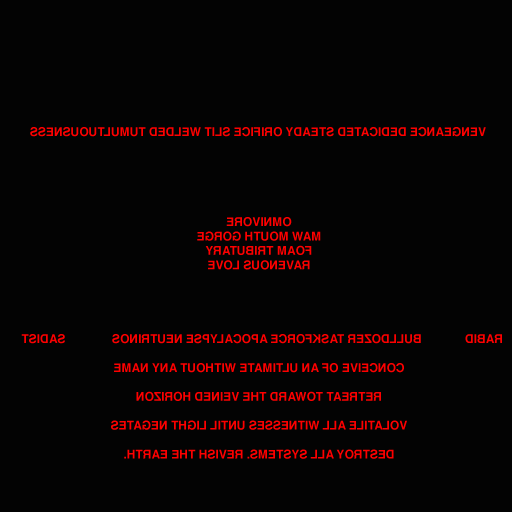
<style>
.page{position:relative;width:512px;height:512px;background:#030303}
.page>*{position:absolute;margin:0}
.t1{font:12px "Helvetica-Bold";color:#fd0000}
</style>
<div class="page">
<p class="t1" style="left:30px;top:127px;width:456px;height:10px;rotate:180deg">VENGEANCE DEDICATED STEADY ORIFICE SLIT WELDED TUMULTUOUSNESS</p>
<p class="t1" style="left:197px;top:217px;width:124px;height:53px;text-align:center;rotate:180deg">OMNIVORE<br>MAW MOUTH GORGE<br>FOAM TRIBUTARY<br>RAVENOUS LOVE</p>
<p class="t1" style="left:21px;top:334px;width:481px;height:10px;rotate:180deg">RABID             BULLDOZER TASKFORCE APOCALYPSE NEUTRINOS              SADIST</p>
<p class="t1" style="left:111px;top:363px;width:296px;height:96px;text-align:center;rotate:180deg">CONCEIVE OF AN ULTIMATE WITHOUT ANY NAME<br><br>RETREAT TOWARD THE VEINED HORIZON<br><br>VOLATILE ALL WITNESSES UNTIL LIGHT NEGATES<br><br>DESTROY ALL SYSTEMS. REVISH THE EARTH.</p>
</div>
